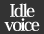
<style>
.page{position:relative;width:44px;height:34px;background:#333333}
.page>*{position:absolute;margin:0}
.t1{font:18px/14px "HeiseiMinStd-W7";letter-spacing:-0.08em;color:#ffffff}
</style>
<div class="page">
<p class="t1" style="left:4px;top:3px;width:36px;height:28px;text-align:center">Idle<br>voice</p>
</div>
